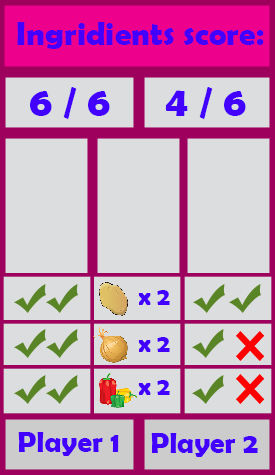
<style>
.page{position:relative;width:275px;height:475px;background:#dcddde}
.page>*{position:absolute;margin:0}
.t1{font:33.3px "BerlinSansFBDemi-Bold";color:#4200ff}
.t2{font:41.7px "BerlinSansFBDemi-Bold";color:#4200ff}
.t3{font:25px "BerlinSansFBDemi-Bold";color:#4200ff}
.t4{font:29.2px "BerlinSansFBDemi-Bold";color:#4200ff}
</style>
<div class="page">
<p class="t1" style="left:17px;top:22px;width:247px;height:27px">Ingridients score:</p>
<p class="t2" style="left:30px;top:87px;width:80px;height:32px">6 / 6</p>
<p class="t2" style="left:165px;top:87px;width:81px;height:32px">4 / 6</p>
<p class="t3" style="left:138px;top:290px;width:32px;height:15px">x 2</p>
<p class="t3" style="left:138px;top:337px;width:32px;height:15px">x 2</p>
<p class="t3" style="left:138px;top:380px;width:32px;height:15px">x 2</p>
<p class="t4" style="left:18px;top:432px;width:101px;height:24px">Player 1</p>
<p class="t4" style="left:151px;top:433px;width:107px;height:24px">Player 2</p>
</div>
